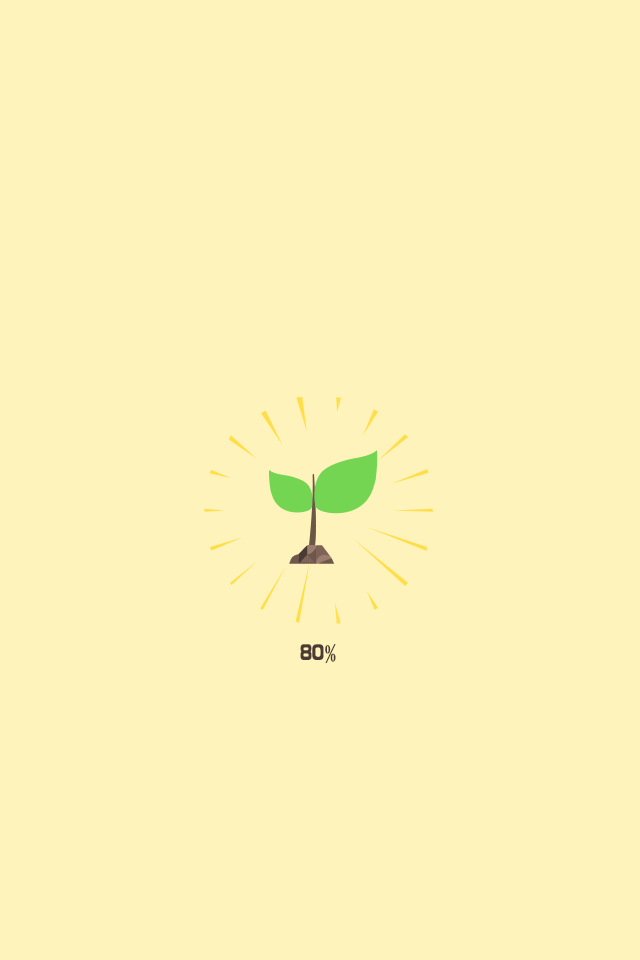
<style>
.page{position:relative;width:640px;height:960px;background:#fff3bc}
.page>*{position:absolute;margin:0}
.t1{font:24px "HYk1gj";color:#4a3c34}
</style>
<div class="page">
<p class="t1" style="left:300px;top:644px;width:36px;height:19px">80%</p>
</div>
